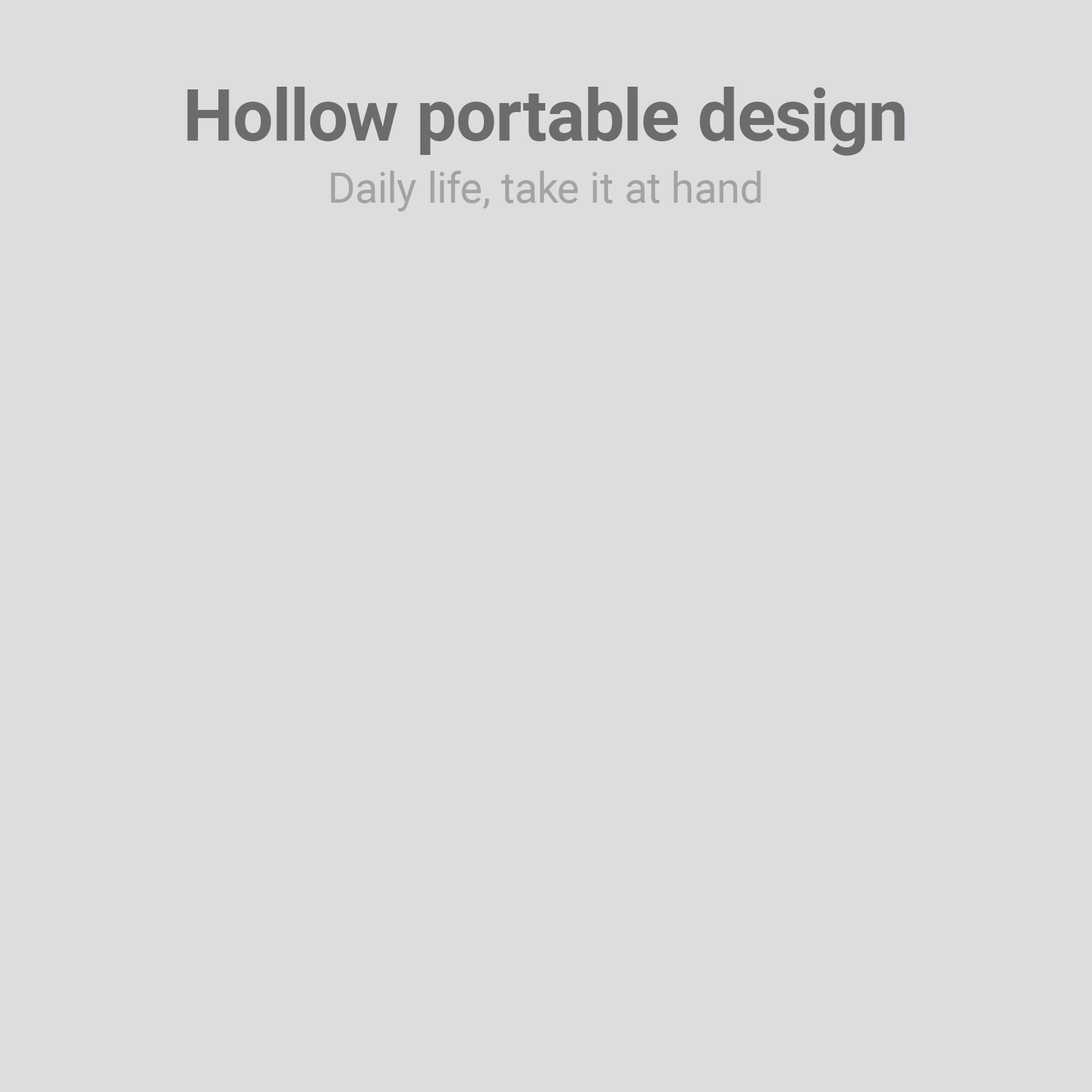
<style>
.page{position:relative;width:1092px;height:1092px;background:#dcdddf}
.page>*{position:absolute;margin:0}
.t1{font:71.3px "Roboto-Bold";color:#6c6c6c}
.t2{font:42.2px "Roboto-Regular";color:#a3a3a3}
</style>
<div class="page">
<p class="t1" style="left:187px;top:87px;width:718px;height:69px">Hollow portable design</p>
<p class="t2" style="left:331px;top:171px;width:430px;height:41px">Daily life, take it at hand</p>
</div>
